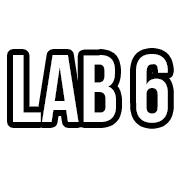
<style>
.page{position:relative;width:180px;height:180px;background:#ffffff}
.page>*{position:absolute;margin:0}
.t1{font:95px "BebasNeueBold";color:#ffffff}
</style>
<div class="page">
<p class="t1" style="left:13px;top:54px;width:155px;height:69px">lab 6</p>
</div>
